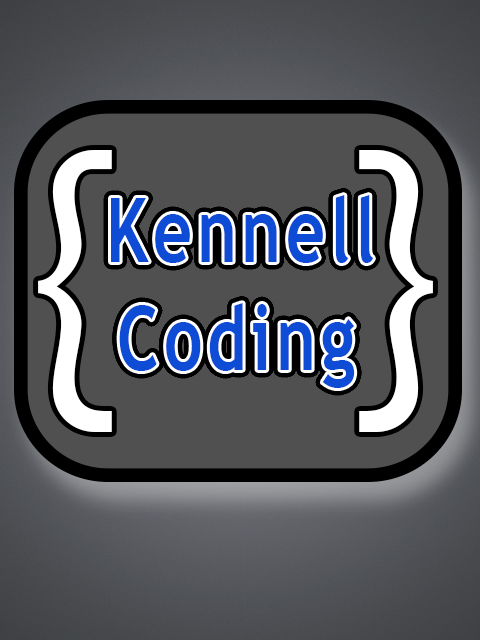
<style>
.page{position:relative;width:480px;height:640px;background:#505050}
.page>*{position:absolute;margin:0}
.t1{font:300px "TrebuchetMS";letter-spacing:0.05em;color:#ffffff;scale:0.75 1}
.t2{font:90px "TrebuchetMS-Bold";letter-spacing:0.075em;color:#0f4cd5;scale:0.75 1}
</style>
<div class="page">
<p class="t1" style="left:38px;top:150px;width:74px;height:282px">{</p>
<p class="t1" style="left:359px;top:150px;width:74px;height:282px;rotate:180deg">{</p>
<p class="t2" style="left:111px;top:195px;width:262px;height:193px">Kennell<br>  Coding</p>
</div>
